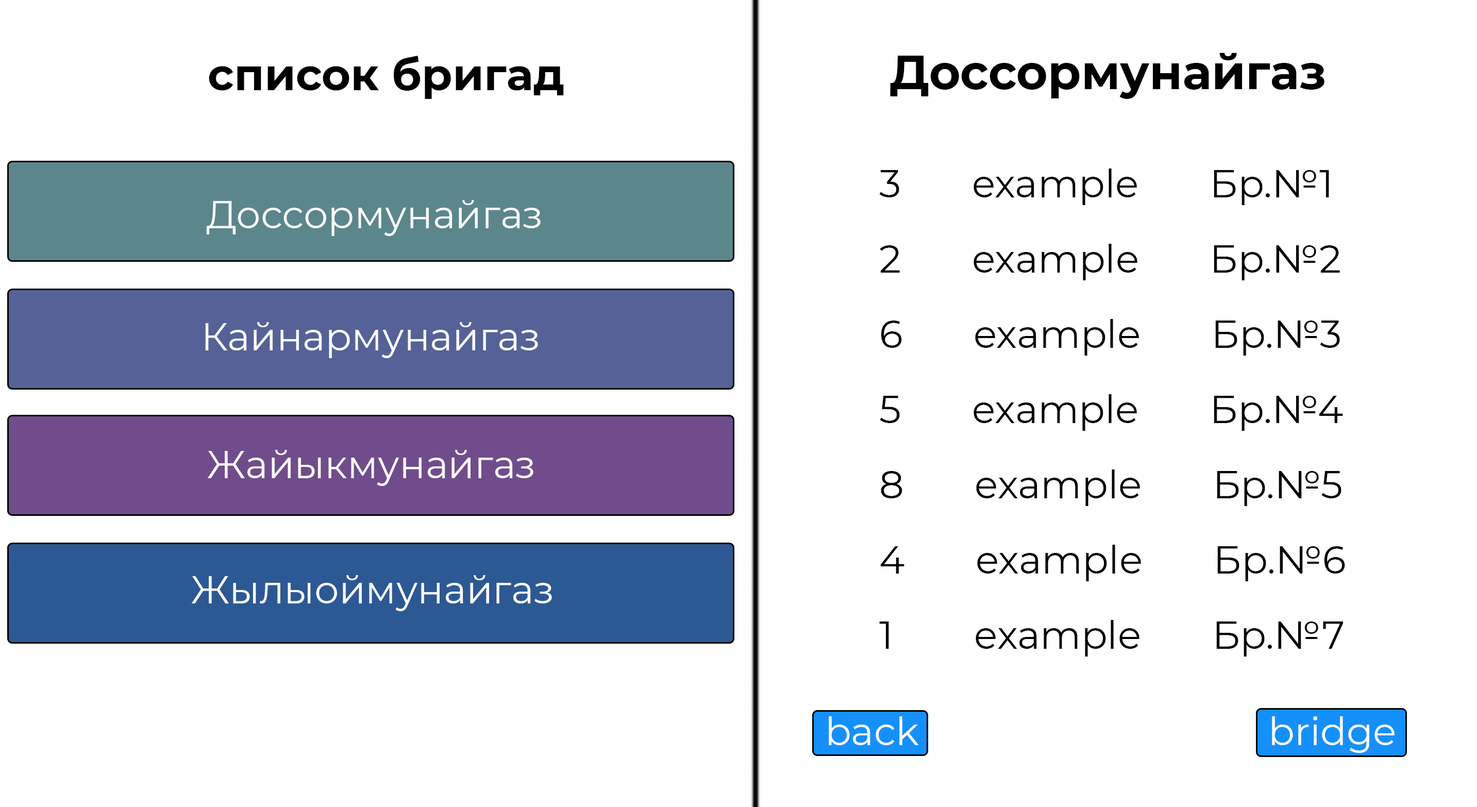
<style>
.page{position:relative;width:1477px;height:807px;background:#ffffff}
.page>*{position:absolute;margin:0}
.t1{font:47.9px "Montserrat-Bold";color:#000000}
.t2{font:44.3px "Montserrat-Bold";color:#000000}
.t3{font:38.7px/75.3px "Montserrat-Regular";color:#000000}
.t4{font:38.7px "Montserrat-Regular";color:#ffffff}
</style>
<div class="page">
<p class="t1" style="left:890px;top:53px;width:435px;height:46px">Доссормунайгаз</p>
<p class="t2" style="left:209px;top:56px;width:355px;height:43px">список бригад</p>
<p class="t3" style="left:879px;top:169px;width:466px;height:488px">3       example       Бр.№1<br>2       example       Бр.№2<br>6       example       Бр.№3<br>5       example       Бр.№4<br>8       example       Бр.№5<br>4       example       Бр.№6<br>1        example       Бр.№7</p>
<p class="t4" style="left:206px;top:200px;width:335px;height:36px">Доссормунайгаз</p>
<p class="t4" style="left:205px;top:322px;width:333px;height:36px">Кайнармунайгаз</p>
<p class="t4" style="left:207px;top:450px;width:326px;height:36px">Жайыкмунайгаз</p>
<p class="t4" style="left:191px;top:575px;width:361px;height:36px">Жылыоймунайгаз</p>
<p class="t4" style="left:829px;top:716px;width:90px;height:29px">back</p>
<p class="t4" style="left:1272px;top:716px;width:123px;height:37px">bridge</p>
</div>
